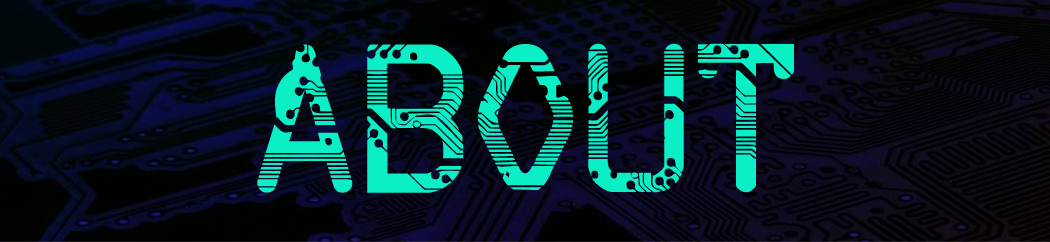
<style>
.page{position:relative;width:1050px;height:242px}
.page>*{position:absolute;margin:0}
.t1{font:215.3px "Circuit";color:#0befc7}
</style>
<div class="page">
<p class="t1" style="left:257px;top:43px;width:537px;height:150px">about</p>
</div>
